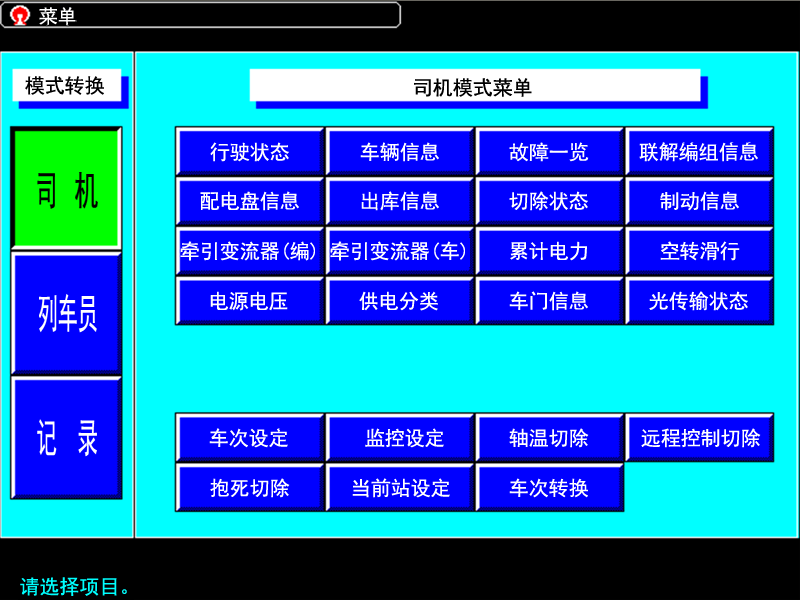
<style>
.page{position:relative;width:800px;height:600px;background:#00ffff}
.page>*{position:absolute;margin:0}
.t1{font:19px "SimHei";color:#ffffff}
.t2{font:20px "SimHei";color:#000000}
.t3{font:20px "SimHei";color:#ffffff}
.t4{font:20px "SimHei";color:#00ffff}
</style>
<div class="page">
<p class="t1" style="left:39px;top:7px;width:37px;height:18px">菜单</p>
<p class="t2" style="left:25px;top:76px;width:79px;height:19px">模式转换</p>
<p class="t2" style="left:414px;top:78px;width:118px;height:19px">司机模式菜单</p>
<p class="t3" style="left:210px;top:142px;width:79px;height:20px">行驶状态</p>
<p class="t3" style="left:360px;top:142px;width:79px;height:20px">车辆信息</p>
<p class="t3" style="left:509px;top:142px;width:80px;height:20px">故障一览</p>
<p class="t3" style="left:639px;top:142px;width:119px;height:20px">联解编组信息</p>
<p class="t3" style="left:200px;top:191px;width:99px;height:20px">配电盘信息</p>
<p class="t3" style="left:361px;top:191px;width:78px;height:20px">出库信息</p>
<p class="t3" style="left:509px;top:191px;width:79px;height:20px">切除状态</p>
<p class="t3" style="left:660px;top:191px;width:79px;height:20px">制动信息</p>
<p class="t3" style="left:180px;top:241px;width:135px;height:20px">牵引变流器(编)</p>
<p class="t3" style="left:330px;top:241px;width:135px;height:20px">牵引变流器(车)</p>
<p class="t3" style="left:510px;top:241px;width:77px;height:20px">累计电力</p>
<p class="t3" style="left:660px;top:241px;width:80px;height:20px">空转滑行</p>
<p class="t3" style="left:210px;top:291px;width:78px;height:20px">电源电压</p>
<p class="t3" style="left:359px;top:291px;width:79px;height:20px">供电分类</p>
<p class="t3" style="left:509px;top:291px;width:79px;height:20px">车门信息</p>
<p class="t3" style="left:649px;top:291px;width:99px;height:20px">光传输状态</p>
<p class="t3" style="left:209px;top:428px;width:79px;height:20px">车次设定</p>
<p class="t3" style="left:365px;top:428px;width:79px;height:20px">监控设定</p>
<p class="t3" style="left:509px;top:428px;width:80px;height:20px">轴温切除</p>
<p class="t3" style="left:641px;top:428px;width:120px;height:20px">远程控制切除</p>
<p class="t3" style="left:210px;top:478px;width:80px;height:20px">抱死切除</p>
<p class="t3" style="left:352px;top:478px;width:98px;height:20px">当前站设定</p>
<p class="t3" style="left:509px;top:478px;width:79px;height:20px">车次转换</p>
<p class="t4" style="left:20px;top:577px;width:107px;height:19px">请选择项目。</p>
</div>
